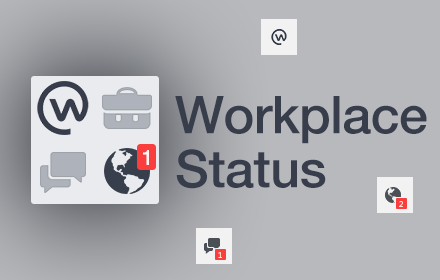
<style>
.page{position:relative;width:440px;height:280px;background:#b7b9bc}
.page>*{position:absolute;margin:0}
.t1{font:52px/54px "HelveticaNeueLT-Medium";letter-spacing:-0.01em;color:#383d4c}
</style>
<div class="page">
<p class="t1" style="left:175px;top:96px;width:252px;height:93px">Workplace Status</p>
</div>
